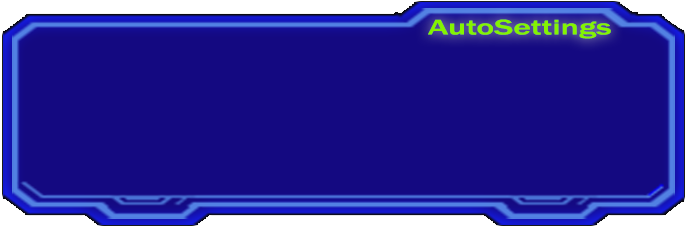
<style>
.page{position:relative;width:687px;height:227px;background:#140981}
.page>*{position:absolute;margin:0}
.t1{font:22px "FranklinGothic-Medium";color:#84f400;scale:1.53 1}
</style>
<div class="page">
<p class="t1" style="left:428px;top:19px;width:183px;height:20px">AutoSettings</p>
</div>
